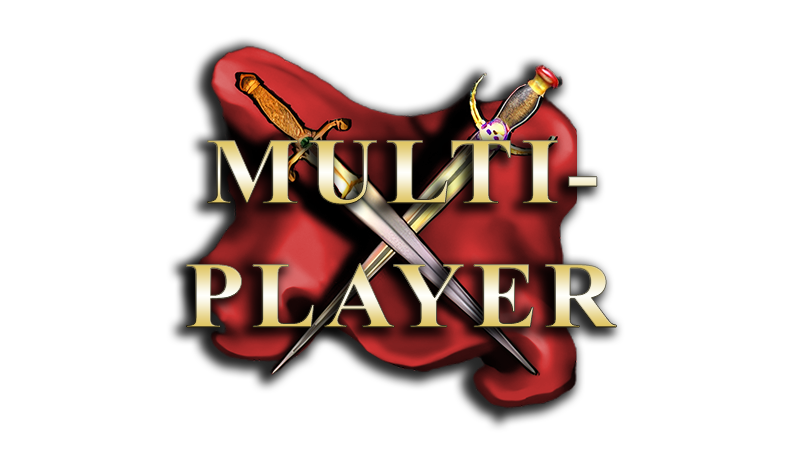
<style>
.page{position:relative;width:800px;height:472px;background:#ffffff}
.page>*{position:absolute;margin:0}
.t1{font:94px "TimesNewRomanPS-BoldMT";letter-spacing:0.07em;scale:1.05 1}
</style>
<div class="page">
<p class="t1" style="left:207px;top:140px;width:390px;height:65px">MULTI-</p>
<p class="t1" style="left:186px;top:263px;width:431px;height:64px">PLAYER</p>
</div>
